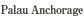
<style>
.page{position:relative;width:84px;height:18px;background:#ffffff}
.page>*{position:absolute;margin:0}
.t1{font:12px "RyuminPro-ExBold";letter-spacing:-0.04em;color:#4c4843;scale:0.9 1}
</style>
<div class="page">
<p class="t1" style="left:0px;top:5px;width:83px;height:11px">Palau Anchorage</p>
</div>
